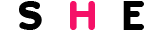
<style>
.page{position:relative;width:162px;height:31px;background:#ffffff}
.page>*{position:absolute;margin:0}
.t1{font:46px "20thCenturyFontBold";letter-spacing:0.55em;color:#000000}
.t2{font:46px "20thCenturyFontBold";letter-spacing:0.55em;color:#f51167}
</style>
<div class="page">
<p class="t1" style="left:19px;top:1px;width:125px;height:29px">S<span class="t2">H</span>E</p>
</div>
